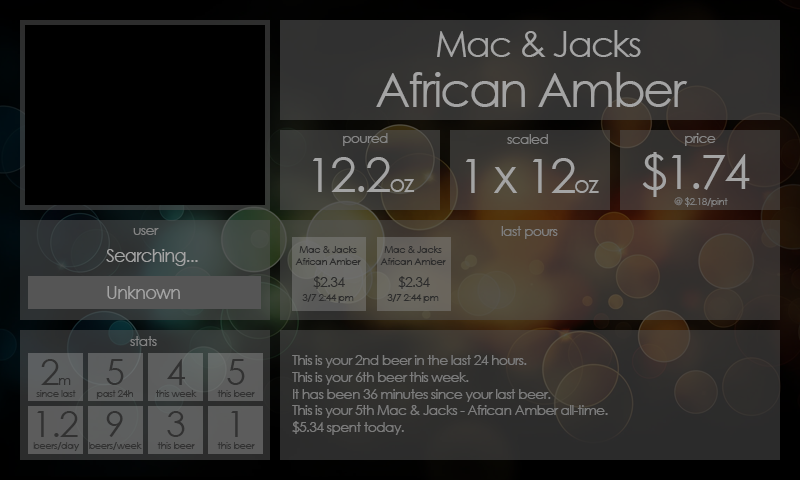
<style>
.page{position:relative;width:800px;height:480px}
.page>*{position:absolute;margin:0}
.t1{font:36px "CenturyGothic";letter-spacing:-0.05em;color:#a4a4a4}
.t2{font:48px "CenturyGothic";letter-spacing:-0.05em;color:#a4a4a4}
.t3{font:14px "CenturyGothic";letter-spacing:-0.05em;color:#868686}
.t4{font:24px "CenturyGothic";letter-spacing:-0.05em;color:#a4a4a4}
.t5{font:10px "CenturyGothic";letter-spacing:-0.05em;color:#808080}
.t6{font:14px "CenturyGothic";letter-spacing:-0.05em;color:#838383}
.t7{font:14px "CenturyGothic";letter-spacing:-0.05em;color:#808080}
.t8{font:10px "CenturyGothic";letter-spacing:-0.05em;color:#2c2c2c}
.t9{font:18px "CenturyGothic";letter-spacing:-0.05em;color:#a4a4a4}
.t10{font:14px "CenturyGothic";letter-spacing:-0.05em;color:#2c2c2c}
.t11{font:36px "CenturyGothic";letter-spacing:-0.05em;color:#323232}
.t12{font:14px "CenturyGothic";letter-spacing:-0.05em;color:#323232}
.t13{font:14px "CenturyGothic";letter-spacing:-0.05em;color:#7c7c7c}
.t14{font:10px "CenturyGothic";letter-spacing:-0.05em;color:#323232}
</style>
<div class="page">
<p class="t1" style="left:437px;top:30px;width:204px;height:27px">Mac &amp; Jacks</p>
<p class="t2" style="left:376px;top:72px;width:312px;height:35px">African Amber</p>
<p class="t3" style="left:343px;top:133px;width:45px;height:13px">poured</p>
<p class="t3" style="left:507px;top:134px;width:41px;height:10px">scaled</p>
<p class="t3" style="left:685px;top:133px;width:31px;height:13px">price</p>
<p class="t2" style="left:313px;top:157px;width:102px;height:35px">12.2<span class="t4">oz</span></p>
<p class="t2" style="left:466px;top:158px;width:133px;height:35px">1 x 12<span class="t4">oz</span></p>
<p class="t2" style="left:642px;top:152px;width:108px;height:45px">$1.74</p>
<p class="t5" style="left:674px;top:197px;width:54px;height:10px">@ $2.18/pint</p>
<p class="t6" style="left:133px;top:228px;width:26px;height:7px">user</p>
<p class="t7" style="left:501px;top:226px;width:57px;height:13px">last pours</p>
<p class="t8" style="left:295px;top:246px;width:66px;height:57px;text-align:center">Mac &amp; Jacks<br>African Amber<br><br><br>3/7 2:44 pm</p>
<p class="t8" style="left:380px;top:246px;width:66px;height:57px;text-align:center">Mac &amp; Jacks<br>African Amber<br><br><br>3/7 2:44 pm</p>
<p class="t9" style="left:106px;top:249px;width:92px;height:17px">Searching...</p>
<p class="t10" style="left:313px;top:276px;width:32px;height:13px">$2.34</p>
<p class="t10" style="left:398px;top:276px;width:32px;height:13px">$2.34</p>
<p class="t9" style="left:107px;top:286px;width:73px;height:13px">Unknown</p>
<p class="t6" style="left:130px;top:336px;width:27px;height:10px">stats</p>
<p class="t11" style="left:41px;top:359px;width:30px;height:26px">2<span class="t12">m</span></p>
<p class="t11" style="left:106px;top:359px;width:18px;height:26px">5</p>
<p class="t11" style="left:167px;top:359px;width:18px;height:26px">4</p>
<p class="t11" style="left:227px;top:359px;width:18px;height:26px">5</p>
<p class="t13" style="left:292px;top:355px;width:316px;height:80px">This is your 2nd beer in the last 24 hours.<br>This is your 6th beer this week.<br>It has been 36 minutes since your last beer.<br>This is your 5th Mac &amp; Jacks - African Amber all-time.<br>$5.34 spent today.</p>
<p class="t14" style="left:36px;top:390px;width:40px;height:7px">since last</p>
<p class="t14" style="left:96px;top:390px;width:37px;height:9px">past 24h</p>
<p class="t14" style="left:156px;top:390px;width:41px;height:7px">this week</p>
<p class="t14" style="left:217px;top:390px;width:38px;height:7px">this beer</p>
<p class="t11" style="left:37px;top:411px;width:41px;height:26px">1.2</p>
<p class="t11" style="left:106px;top:411px;width:17px;height:26px">9</p>
<p class="t11" style="left:167px;top:411px;width:18px;height:26px">3</p>
<p class="t11" style="left:231px;top:411px;width:7px;height:26px">1</p>
<p class="t14" style="left:33px;top:442px;width:47px;height:9px">beers/day</p>
<p class="t14" style="left:89px;top:442px;width:53px;height:8px">beers/week</p>
<p class="t14" style="left:157px;top:442px;width:38px;height:7px">this beer</p>
<p class="t14" style="left:217px;top:442px;width:38px;height:7px">this beer</p>
</div>
